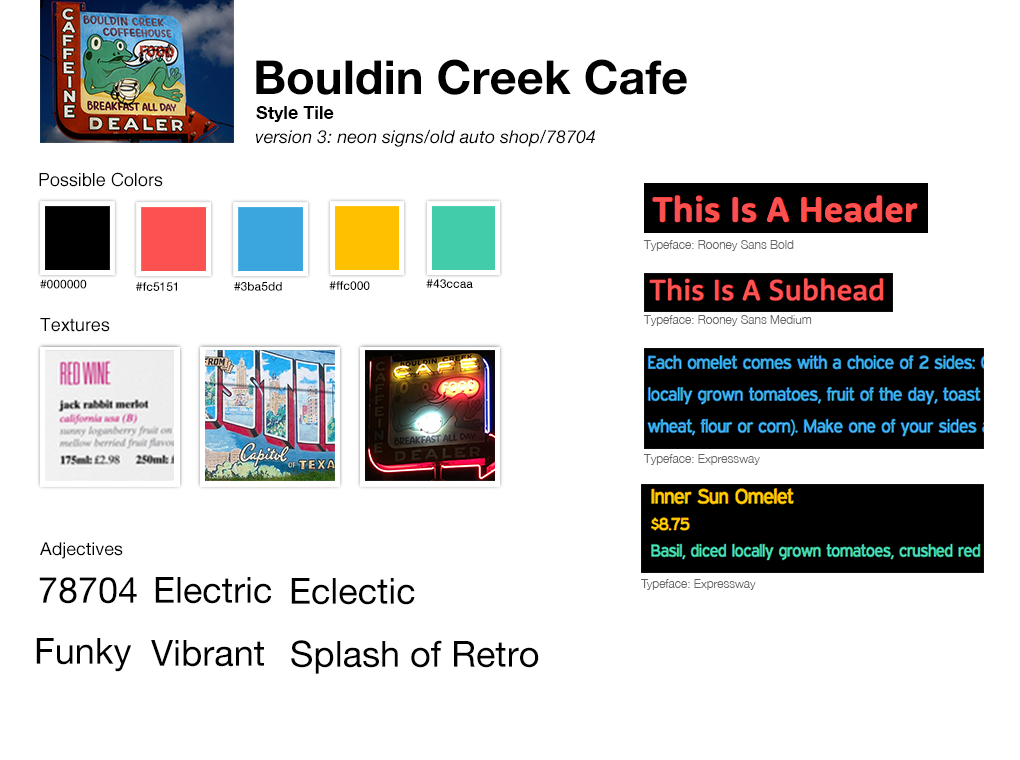
<style>
.page{position:relative;width:1020px;height:760px;background:#ffffff}
.page>*{position:absolute;margin:0}
.t1{font:47px "HelveticaNeue-Bold";color:#000000}
.t2{font:18px "HelveticaNeue-Bold";color:#000000}
.t3{font:18px "HelveticaNeue-Italic";color:#000000}
.t4{font:18px "Helvetica";color:#000000}
.t5{font:12px "HelveticaNeue-Light";color:#666666}
.t6{font:12px "HelveticaNeue-Medium";color:#000000}
.t7{font:18px "HelveticaNeue";color:#000000}
.t8{font:36px "HelveticaNeue";color:#000000}
</style>
<div class="page">
<p class="t1" style="left:256px;top:59px;width:431px;height:36px">Bouldin Creek Cafe</p>
<p class="t2" style="left:256px;top:106px;width:78px;height:16px">Style Tile</p>
<p class="t3" style="left:255px;top:129px;width:340px;height:18px">version 3: neon signs/old auto shop/78704</p>
<p class="t4" style="left:39px;top:172px;width:124px;height:15px">Possible Colors</p>
<p class="t5" style="left:643px;top:240px;width:151px;height:11px">Typeface: Rooney Sans Bold</p>
<p class="t6" style="left:40px;top:279px;width:47px;height:10px">#000000</p>
<p class="t6" style="left:329px;top:281px;width:41px;height:9px">#ffc000</p>
<p class="t6" style="left:426px;top:279px;width:47px;height:9px">#43ccaa</p>
<p class="t6" style="left:136px;top:282px;width:41px;height:9px">#fc5151</p>
<p class="t6" style="left:234px;top:282px;width:48px;height:9px">#3ba5dd</p>
<p class="t4" style="left:40px;top:318px;width:70px;height:14px">Textures</p>
<p class="t5" style="left:643px;top:315px;width:169px;height:11px">Typeface: Rooney Sans Medium</p>
<p class="t5" style="left:643px;top:454px;width:117px;height:11px">Typeface: Expressway</p>
<p class="t7" style="left:40px;top:542px;width:83px;height:17px">Adjectives</p>
<p class="t8" style="left:39px;top:577px;width:98px;height:27px">78704</p>
<p class="t8" style="left:155px;top:577px;width:117px;height:27px">Electric</p>
<p class="t8" style="left:291px;top:578px;width:124px;height:27px">Eclectic</p>
<p class="t5" style="left:641px;top:579px;width:115px;height:11px">Typeface: Expressway</p>
<p class="t8" style="left:36px;top:638px;width:96px;height:34px">Funky</p>
<p class="t8" style="left:151px;top:640px;width:113px;height:27px">Vibrant</p>
<p class="t8" style="left:291px;top:640px;width:248px;height:34px">Splash of Retro</p>
</div>
